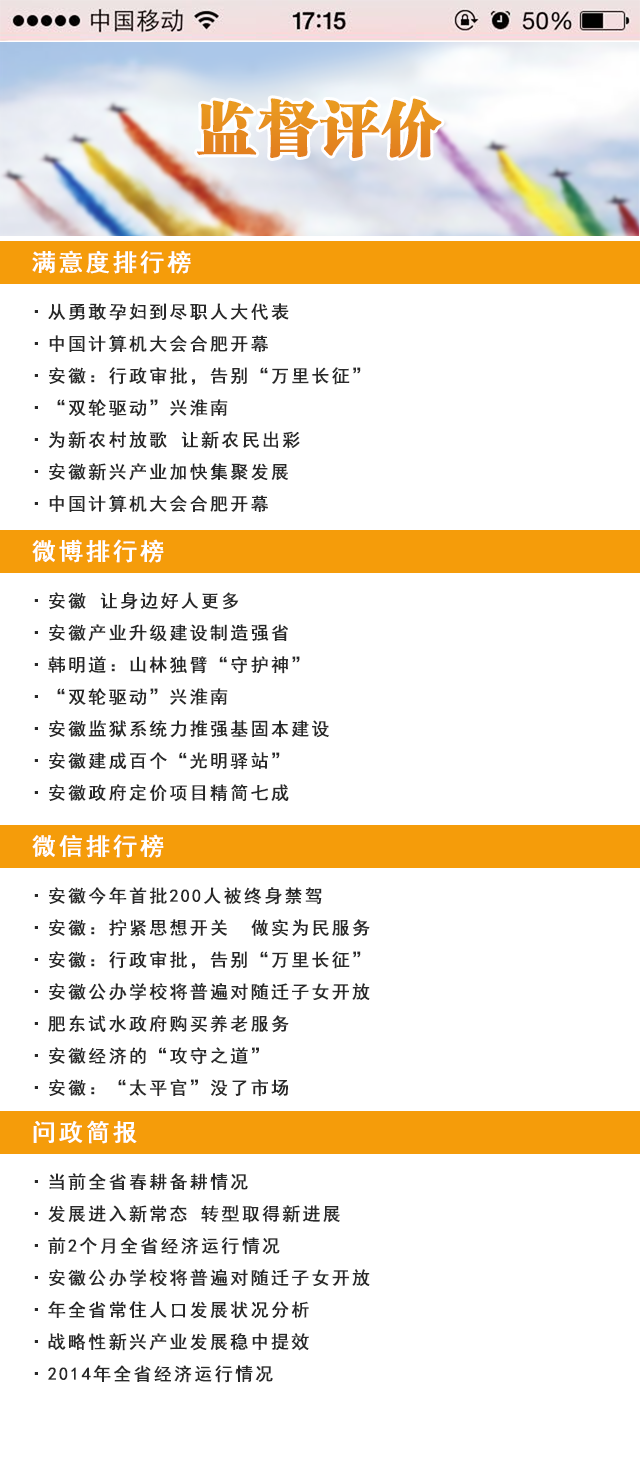
<style>
.page{position:relative;width:640px;height:1481px;background:#ffffff}
.page>*{position:absolute;margin:0}
.t1{font:60px "FZCSJW--GB1-0";color:#e68e20;font-weight:bold}
.t2{font:24px "SimHei";letter-spacing:0.1em;color:#ffffff;font-weight:bold}
.t3{font:18px/32px "SimHei";letter-spacing:0.1em;color:#292929;font-weight:bold}
</style>
<div class="page">
<p class="t1" style="left:197px;top:98px;width:245px;height:60px">监督评价</p>
<p class="t2" style="left:32px;top:250px;width:159px;height:24px">满意度排行榜</p>
<p class="t3" style="left:34px;top:303px;width:327px;height:209px">·从勇敢孕妇到尽职人大代表<br>·中国计算机大会合肥开幕  <br>·安徽：行政审批，告别“万里长征” <br>·“双轮驱动”兴淮南 <br>·为新农村放歌 让新农民出彩<br>·安徽新兴产业加快集聚发展 <br>·中国计算机大会合肥开幕</p>
<p class="t2" style="left:32px;top:539px;width:132px;height:24px">微博排行榜</p>
<p class="t3" style="left:34px;top:592px;width:295px;height:210px">·安徽 让身边好人更多<br>·安徽产业升级建设制造强省<br>·韩明道：山林独臂“守护神”<br>·“双轮驱动”兴淮南 <br>·安徽监狱系统力推强基固本建设<br>·安徽建成百个“光明驿站”<br>·安徽政府定价项目精简七成</p>
<p class="t2" style="left:32px;top:834px;width:132px;height:24px">微信排行榜</p>
<p class="t3" style="left:34px;top:887px;width:336px;height:209px">·安徽今年首批200人被终身禁驾<br>·安徽：拧紧思想开关　做实为民服务 <br>·安徽：行政审批，告别“万里长征” <br>·安徽公办学校将普遍对随迁子女开放  <br>·肥东试水政府购买养老服务<br>·安徽经济的“攻守之道”<br>·安徽：“太平官”没了市场</p>
<p class="t2" style="left:33px;top:1120px;width:104px;height:24px">问政简报</p>
<p class="t3" style="left:34px;top:1173px;width:336px;height:210px">·当前全省春耕备耕情况<br>·发展进入新常态 转型取得新进展<br>·前2个月全省经济运行情况 <br>·安徽公办学校将普遍对随迁子女开放  <br>·年全省常住人口发展状况分析<br>·战略性新兴产业发展稳中提效<br>·2014年全省经济运行情况</p>
</div>
